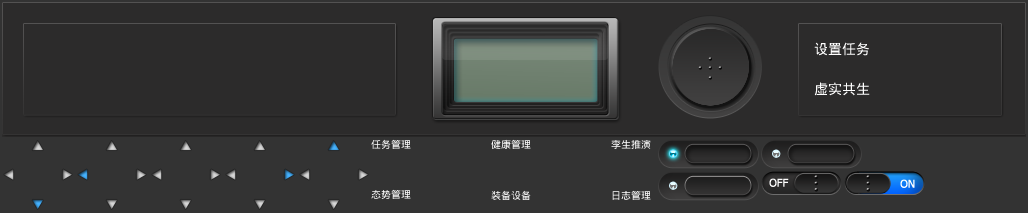
<style>
.page{position:relative;width:1028px;height:213px;background:#2c2b2b}
.page>*{position:absolute;margin:0}
.t1{font:14px "DroidSansFallback";color:#ffffff}
.t2{font:10px "DroidSansFallback";color:#ffffff}
</style>
<div class="page">
<p class="t1" style="left:814px;top:42px;width:56px;height:14px">设置任务</p>
<p class="t1" style="left:814px;top:82px;width:56px;height:14px">虚实共生</p>
<p class="t2" style="left:371px;top:139px;width:40px;height:10px">任务管理</p>
<p class="t2" style="left:491px;top:139px;width:40px;height:10px">健康管理</p>
<p class="t2" style="left:611px;top:139px;width:40px;height:10px">孪生推演</p>
<p class="t2" style="left:371px;top:189px;width:40px;height:10px">态势管理</p>
<p class="t2" style="left:491px;top:190px;width:40px;height:10px">装备设备</p>
<p class="t2" style="left:612px;top:190px;width:39px;height:10px">日志管理</p>
</div>
